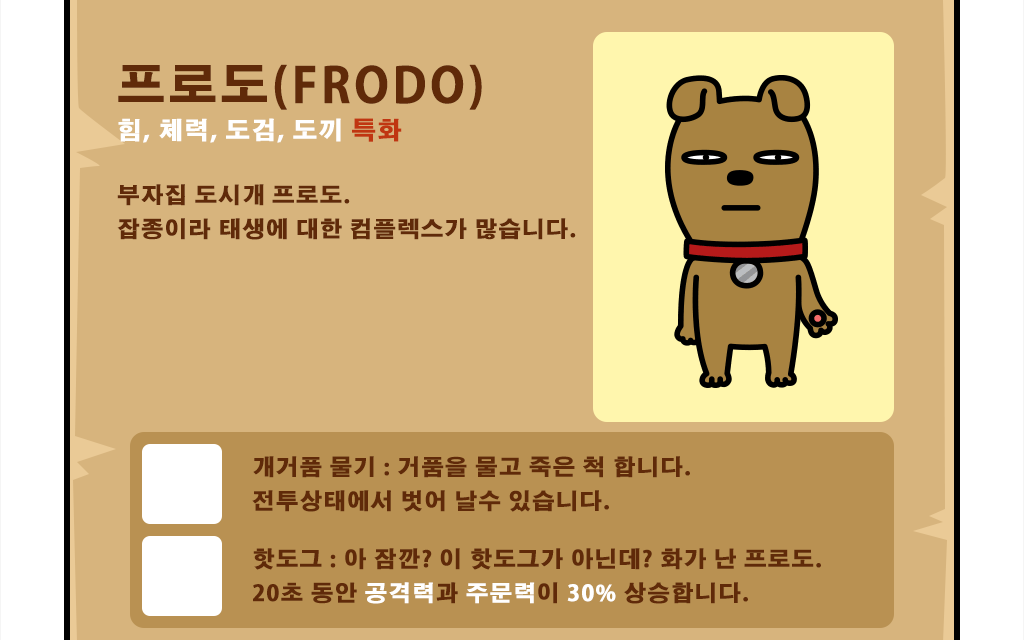
<style>
.page{position:relative;width:1024px;height:640px;background:#d7b47d}
.page>*{position:absolute;margin:0}
.t1{font:24px/36px "AdobeGothicStd-Bold";letter-spacing:0.05em;color:#ffffff;font-weight:bold}
.t2{font:48px/36px "AdobeGothicStd-Bold";letter-spacing:0.05em;color:#602a09;font-weight:bold}
.t3{font:24px/36px "AdobeGothicStd-Bold";letter-spacing:0.05em;color:#c03611;font-weight:bold}
.t4{font:22px/34px "AdobeGothicStd-Bold";letter-spacing:0.05em;color:#602a09;font-weight:bold}
.t5{font:22px/34px "AdobeGothicStd-Bold";letter-spacing:0.05em;color:#ffffff;font-weight:bold}
</style>
<div class="page">
<p class="t1" style="left:118px;top:64px;width:364px;height:79px"><span class="t2">프로도(FRODO)<br></span>힘, 체력, 도검, 도끼 <span class="t3">특화</span></p>
<p class="t4" style="left:117px;top:184px;width:459px;height:56px">부자집 도시개 프로도.<br>잡종이라 태생에 대한 컴플렉스가 많습니다.</p>
<p class="t4" style="left:252px;top:456px;width:438px;height:56px">개거품 물기 : 거품을 물고 죽은 척 합니다.<br>전투상태에서 벗어 날수 있습니다.</p>
<p class="t4" style="left:253px;top:548px;width:568px;height:56px">핫도그 : 아 잠깐? 이 핫도그가 아닌데? 화가 난 프로도.<br>20초 동안 <span class="t5">공격력</span>과 <span class="t5">주문력</span>이 <span class="t5">30%</span> 상승합니다.</p>
</div>
